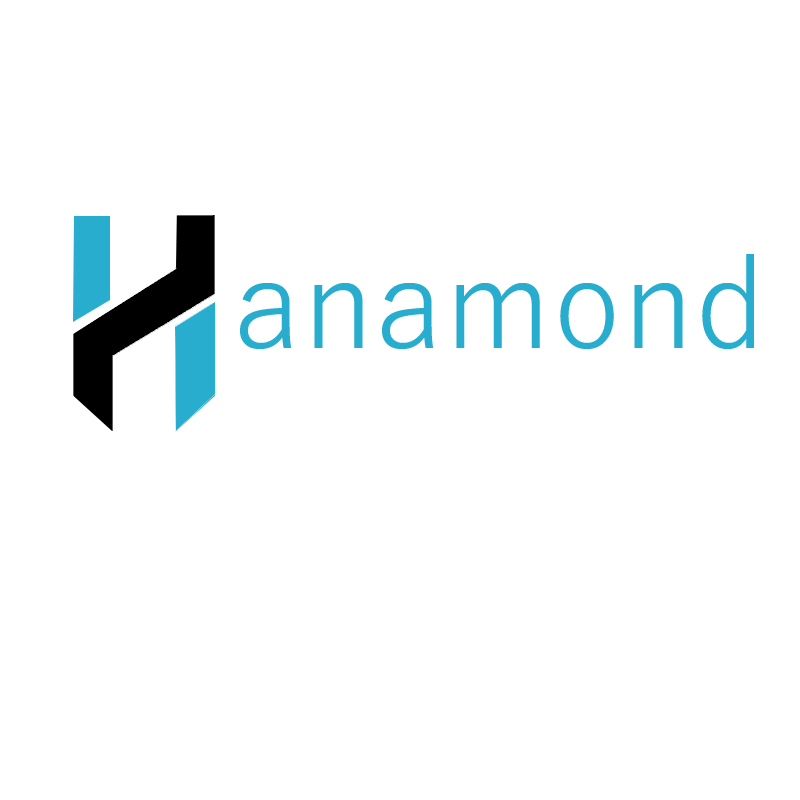
<style>
.page{position:relative;width:800px;height:800px;background:#ffffff}
.page>*{position:absolute;margin:0}
.t1{font:125px "YuGothic-Regular";color:#28adce}
</style>
<div class="page">
<p class="t1" style="left:240px;top:254px;width:514px;height:95px">anamond</p>
</div>
